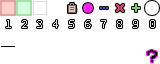
<style>
.page{position:relative;width:160px;height:64px;background:#ffffff}
.page>*{position:absolute;margin:0}
.t1{font:12px "SourceCodePro-Master0";letter-spacing:0.2em;color:#e0e0e0}
</style>
<div class="page">
<p class="t1" style="left:6px;top:20px;width:5px;height:8px">1</p>
<p class="t1" style="left:22px;top:20px;width:5px;height:8px">2</p>
<p class="t1" style="left:37px;top:20px;width:5px;height:8px">3</p>
<p class="t1" style="left:53px;top:20px;width:5px;height:8px">4</p>
<p class="t1" style="left:69px;top:20px;width:5px;height:8px">5</p>
<p class="t1" style="left:85px;top:20px;width:6px;height:8px">6</p>
<p class="t1" style="left:101px;top:20px;width:5px;height:8px">7</p>
<p class="t1" style="left:117px;top:20px;width:5px;height:8px">8</p>
<p class="t1" style="left:133px;top:20px;width:5px;height:8px">9</p>
<p class="t1" style="left:150px;top:20px;width:5px;height:8px">0</p>
</div>
